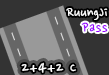
<style>
.page{position:relative;width:109px;height:75px;background:#333333}
.page>*{position:absolute;margin:0}
.t1{font:16px "NanumPen";color:#ffffff}
.t2{font:16px "NanumPen";letter-spacing:0.05em;color:#9900ff}
.t3{font:18px "NanumPen";letter-spacing:0.05em;color:#ffffff}
</style>
<div class="page">
<p class="t1" style="left:66px;top:8px;width:42px;height:12px">RuungJi</p>
<p class="t2" style="left:81px;top:22px;width:27px;height:10px">Pass</p>
<p class="t3" style="left:21px;top:62px;width:55px;height:11px">2+4+2 C</p>
</div>
